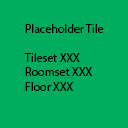
<style>
.page{position:relative;width:128px;height:128px;background:#00ad5f}
.page>*{position:absolute;margin:0}
.t1{font:12px "MyriadPro-Regular";color:#000000}
</style>
<div class="page">
<p class="t1" style="left:24px;top:24px;width:80px;height:67px">Placeholder Tile<br><br>Tileset XXX<br>Roomset XXX<br>Floor XXX</p>
</div>
